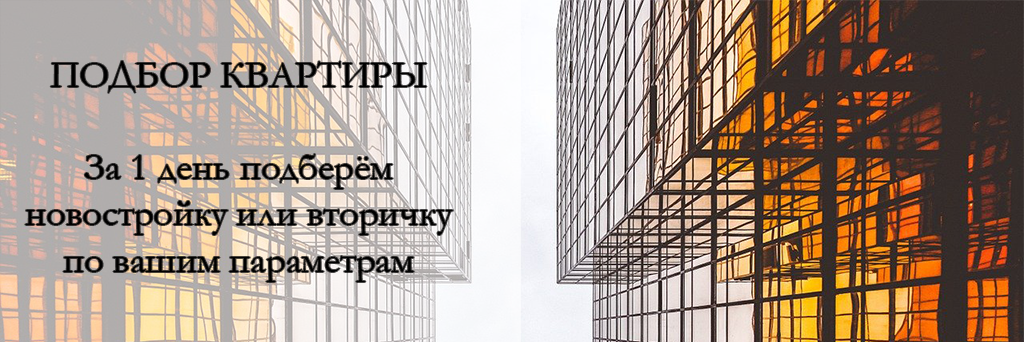
<style>
.page{position:relative;width:1024px;height:342px}
.page>*{position:absolute;margin:0}
.t1{font:38.6px "Garamond";color:#000000}
</style>
<div class="page">
<p class="t1" style="left:25px;top:61px;width:428px;height:221px;text-align:center">ПОДБОР КВАРТИРЫ<br><br>За 1 день подберём<br>новостройку или вторичку<br>по вашим параметрам</p>
</div>
